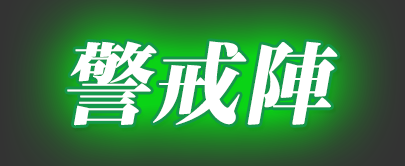
<style>
.page{position:relative;width:405px;height:166px}
.page>*{position:absolute;margin:0}
.t1{font:89px "KochoStd-Heavy";letter-spacing:0.025em;color:#ffffff;font-weight:bold;font-style:italic}
</style>
<div class="page">
<p class="t1" style="left:67px;top:41px;width:271px;height:85px">警戒陣</p>
</div>
